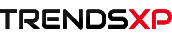
<style>
.page{position:relative;width:172px;height:39px;background:#ffffff}
.page>*{position:absolute;margin:0}
.t1{font:27.7px "Audiowide-Regular";letter-spacing:-0.005em;color:#141414}
.t2{font:27.7px "Audiowide-Regular";letter-spacing:-0.005em;color:#e9001b}
</style>
<div class="page">
<p class="t1" style="left:0px;top:9px;width:172px;height:21px">TRENDS<span class="t2">XP</span></p>
<p class="t1" style="left:0px;top:9px;width:172px;height:21px">TRENDS<span class="t2">XP</span></p>
<p class="t1" style="left:0px;top:9px;width:172px;height:21px">TRENDS<span class="t2">XP</span></p>
</div>
